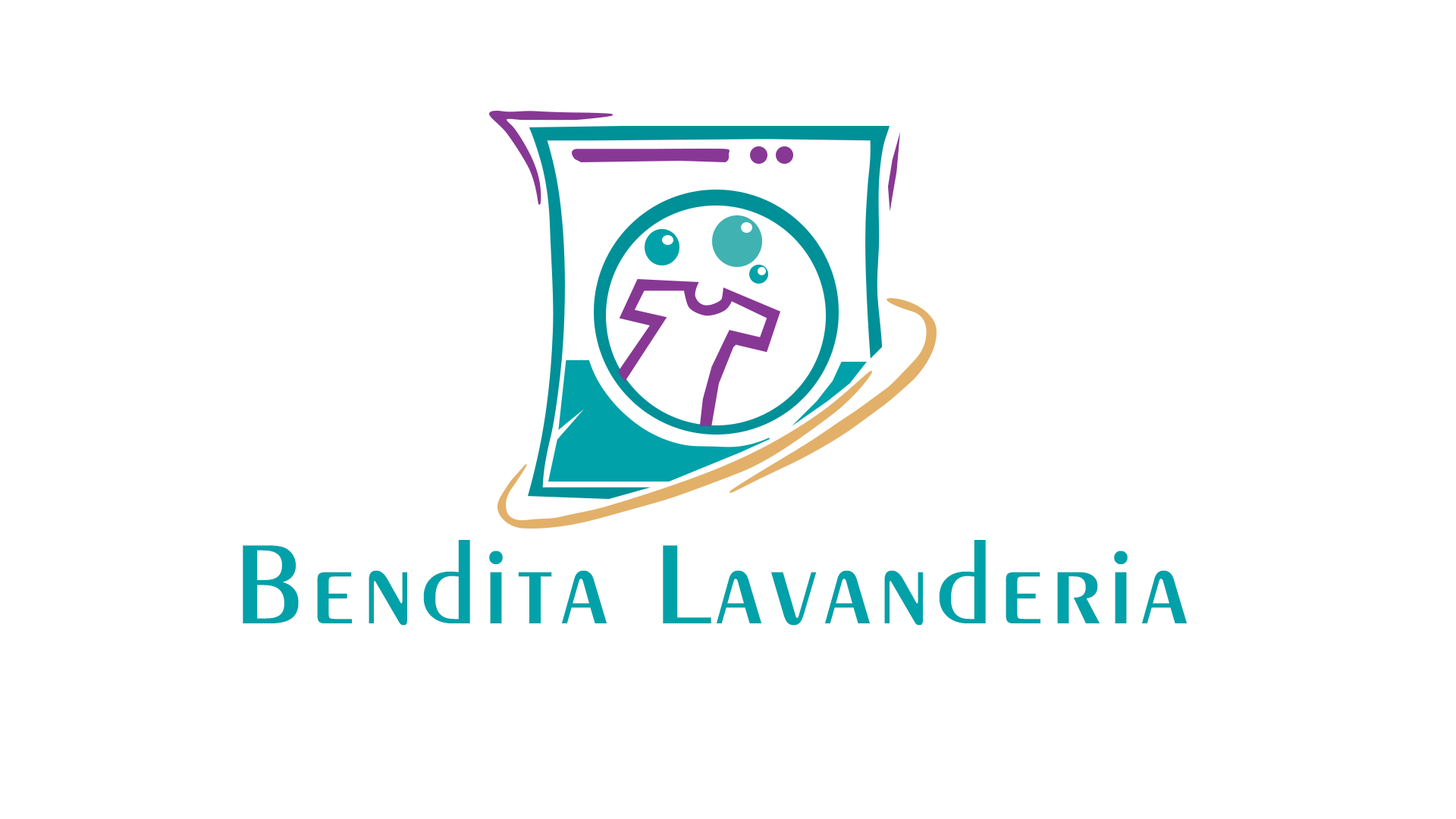
<style>
.page{position:relative;width:1456px;height:819px;background:#ffffff}
.page>*{position:absolute;margin:0}
.t1{font:119.4px "Exotic350BT-DemiBold";letter-spacing:0.04em;color:#00a1a9}
</style>
<div class="page">
<p class="t1" style="left:243px;top:540px;width:944px;height:86px">Bendita Lavanderia</p>
</div>
